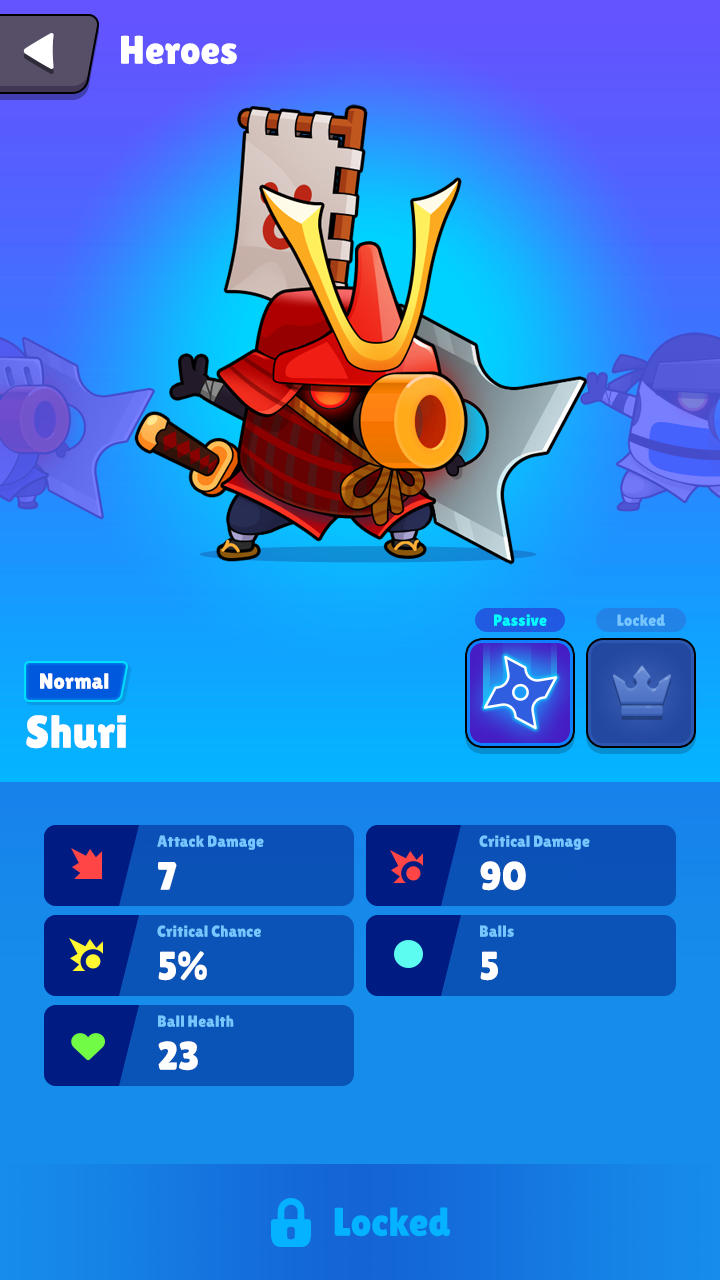
<style>
.page{position:relative;width:720px;height:1280px}
.page>*{position:absolute;margin:0}
.t1{font:40px "LilitaOne";color:#ffffff}
.t2{font:16px "LilitaOne";color:#00ffff}
.t3{font:16px "LilitaOne";color:#76c7ff}
.t4{font:22px "LilitaOne";color:#ffffff}
.t5{font:46px "LilitaOne";color:#ffffff}
.t6{font:40px "LilitaOne";color:#05b2ff}
</style>
<div class="page">
<p class="t1" style="left:121px;top:35px;width:116px;height:30px">Heroes</p>
<p class="t2" style="left:494px;top:614px;width:53px;height:12px">Passive</p>
<p class="t3" style="left:617px;top:614px;width:48px;height:12px">Locked</p>
<p class="t4" style="left:40px;top:673px;width:69px;height:16px">Normal</p>
<p class="t5" style="left:26px;top:715px;width:100px;height:34px">Shuri</p>
<p class="t3" style="left:157px;top:835px;width:107px;height:15px">Attack Damage</p>
<p class="t3" style="left:479px;top:835px;width:111px;height:15px">Critical Damage</p>
<p class="t1" style="left:158px;top:862px;width:19px;height:28px">7</p>
<p class="t1" style="left:480px;top:861px;width:46px;height:30px">90</p>
<p class="t3" style="left:157px;top:925px;width:104px;height:12px">Critical Chance</p>
<p class="t3" style="left:480px;top:925px;width:34px;height:12px">Balls</p>
<p class="t1" style="left:158px;top:951px;width:49px;height:30px">5%</p>
<p class="t1" style="left:480px;top:951px;width:18px;height:30px">5</p>
<p class="t3" style="left:158px;top:1015px;width:76px;height:12px">Ball Health</p>
<p class="t1" style="left:158px;top:1041px;width:40px;height:30px">23</p>
<p class="t6" style="left:334px;top:1207px;width:116px;height:30px">Locked</p>
</div>
